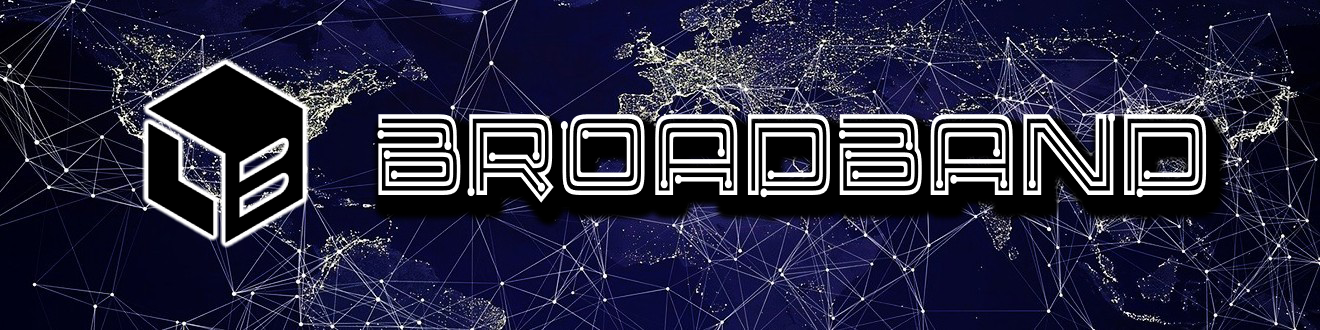
<style>
.page{position:relative;width:1320px;height:330px}
.page>*{position:absolute;margin:0}
.t1{font:112.2px "Membra";color:#ffffff;scale:0.79 1}
</style>
<div class="page">
<p class="t1" style="left:377px;top:113px;width:830px;height:90px">BROADBAND</p>
</div>
